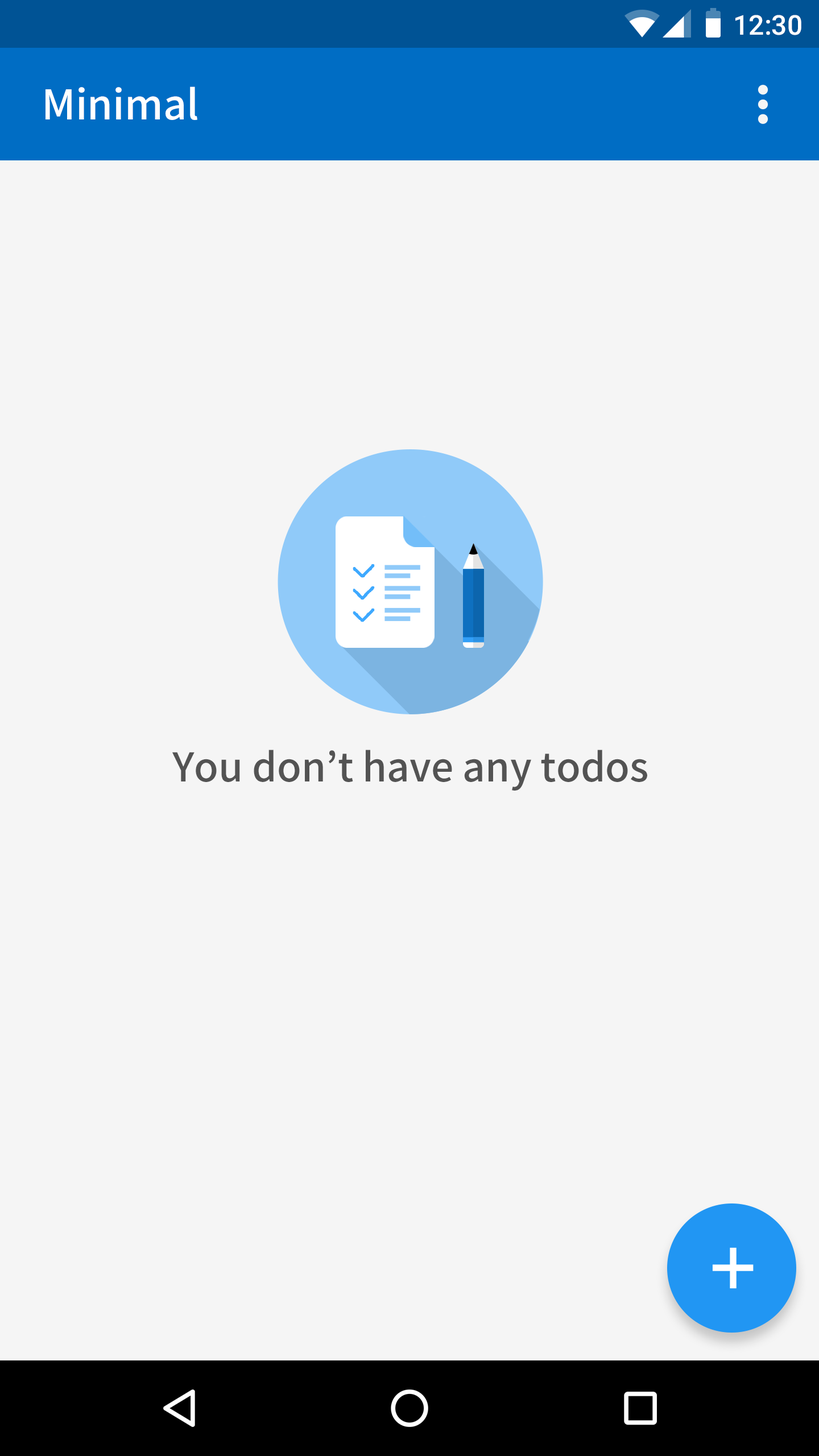
<style>
.page{position:relative;width:819px;height:1456px;background:#f5f5f5}
.page>*{position:absolute;margin:0}
.t1{font:27.3px "Roboto-Medium";color:#ffffff}
.t2{font:40.9px "NotoSansCJKkr-Medium";color:#ffffff}
.t3{font:39.6px "NotoSansCJKkr-Medium";color:#535353}
</style>
<div class="page">
<p class="t1" style="left:735px;top:15px;width:66px;height:20px">12:30</p>
<p class="t2" style="left:45px;top:86px;width:152px;height:34px">Minimal</p>
<p class="t3" style="left:172px;top:750px;width:475px;height:41px">You don’t have any todos</p>
</div>
